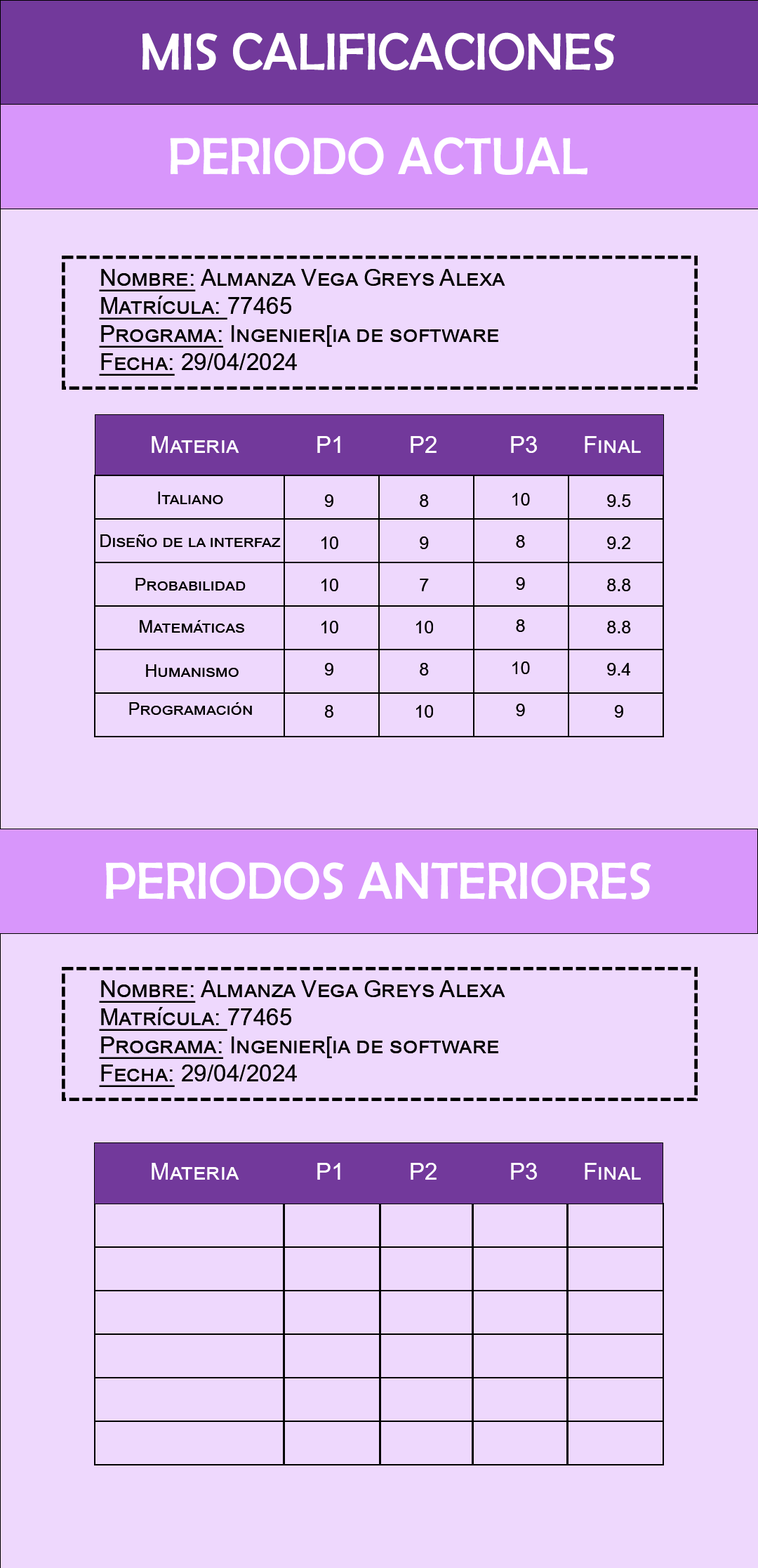
<style>
.page{position:relative;width:758px;height:1568px;background:#eed8fd}
.page>*{position:absolute;margin:0}
.t1{font:52.7px "BerlinSansFB-Reg";color:#ffffff;text-transform:uppercase}
.t2{font:23.4px "ArialMT";color:#000000;font-variant:small-caps}
.t3{font:23.4px "ArialMT";color:#000000;font-variant:small-caps;text-decoration:underline}
.t4{font:23.4px "ArialMT";color:#ffffff;font-variant:small-caps}
.t5{font:17.6px "ArialMT";color:#000000;font-variant:small-caps}
</style>
<div class="page">
<p class="t1" style="left:143px;top:32px;width:473px;height:39px">MIS CALIFICACIONES</p>
<p class="t1" style="left:170px;top:137px;width:418px;height:39px">Periodo actual</p>
<p class="t2" style="left:99px;top:269px;width:407px;height:107px"><span class="t3">Nombre:</span> Almanza Vega Greys Alexa<br><span class="t3">Matrícula: </span>77465<br><span class="t3">Programa:</span> Ingenier[ia de software<br><span class="t3">Fecha:</span> 29/04/2024</p>
<p class="t4" style="left:152px;top:436px;width:489px;height:17px">Materia            P1          P2           P3       Final</p>
<p class="t5" style="left:158px;top:492px;width:65px;height:12px">Italiano</p>
<p class="t5" style="left:322px;top:494px;width:16px;height:224px;text-align:center">9<br><br>10<br><br>10<br><br>10<br><br>9<br><br>8</p>
<p class="t5" style="left:416px;top:494px;width:17px;height:224px;text-align:center">8<br><br>9<br><br>7<br><br>10<br><br>8<br><br>10</p>
<p class="t5" style="left:513px;top:493px;width:17px;height:223px;text-align:center">10<br><br>8<br><br>9<br><br>8<br><br>10<br><br>9</p>
<p class="t5" style="left:607px;top:494px;width:24px;height:224px;text-align:center">9.5<br><br>9.2<br><br>8.8<br><br>8.8<br><br>9.4<br><br>9</p>
<p class="t5" style="left:100px;top:534px;width:181px;height:13px">Diseño de la interfaz</p>
<p class="t5" style="left:136px;top:578px;width:110px;height:13px">Probabilidad</p>
<p class="t5" style="left:140px;top:620px;width:104px;height:13px">Matemáticas</p>
<p class="t5" style="left:146px;top:664px;width:93px;height:13px">Humanismo</p>
<p class="t5" style="left:129px;top:702px;width:123px;height:13px">Programación</p>
<p class="t1" style="left:106px;top:862px;width:546px;height:38px">Periodos anteriores</p>
<p class="t2" style="left:99px;top:980px;width:407px;height:107px"><span class="t3">Nombre:</span> Almanza Vega Greys Alexa<br><span class="t3">Matrícula: </span>77465<br><span class="t3">Programa:</span> Ingenier[ia de software<br><span class="t3">Fecha:</span> 29/04/2024</p>
<p class="t4" style="left:152px;top:1163px;width:489px;height:17px">Materia            P1          P2           P3       Final</p>
</div>
